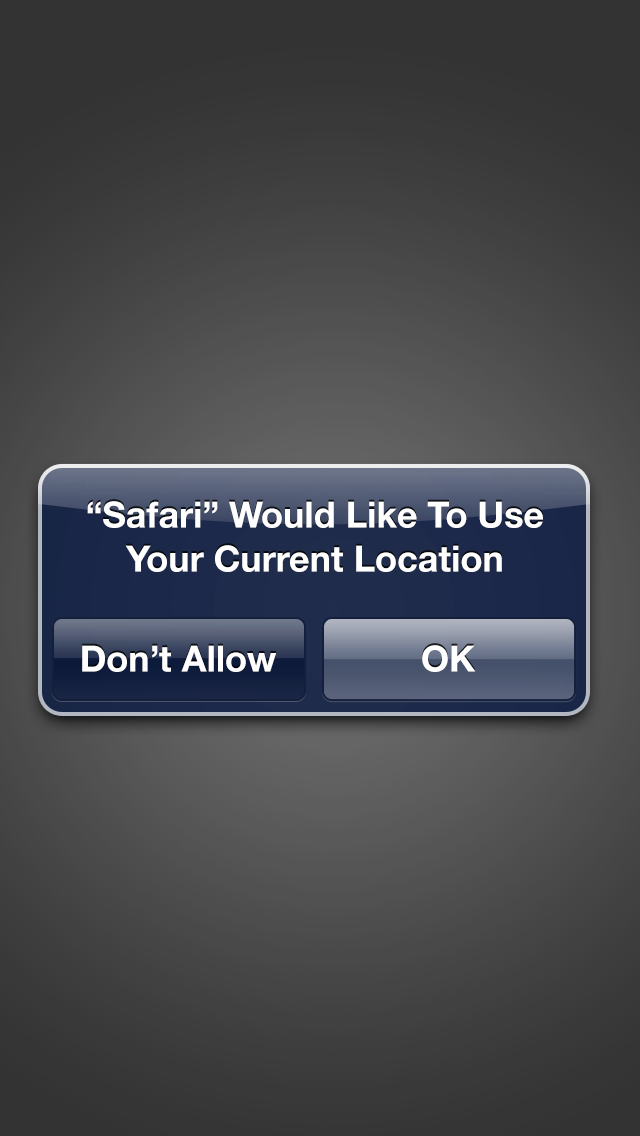
<style>
.page{position:relative;width:640px;height:1136px}
.page>*{position:absolute;margin:0}
.t1{font:36px/44px "HelveticaNeue-Bold";color:#ffffff}
.t2{font:36px "HelveticaNeue-Bold";color:#ffffff}
</style>
<div class="page">
<p class="t1" style="left:87px;top:501px;width:456px;height:71px;text-align:center">“Safari” Would Like To Use<br>Your Current Location</p>
<p class="t2" style="left:82px;top:645px;width:194px;height:27px">Don’t Allow</p>
<p class="t2" style="left:422px;top:645px;width:54px;height:27px">OK</p>
</div>
